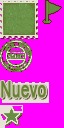
<style>
.page{position:relative;width:64px;height:128px;background:#ff00ff}
.page>*{position:absolute;margin:0}
.t1{font:22px "ArialMT";color:#688233;font-weight:bold;scale:0.7 1}
</style>
<div class="page">
<p class="t1" style="left:1px;top:81px;width:45px;height:17px">Nuevo</p>
</div>
